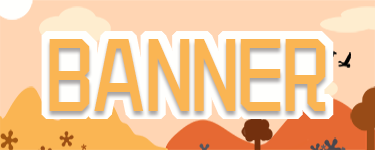
<style>
.page{position:relative;width:375px;height:150px;background:#ffd5b3}
.page>*{position:absolute;margin:0}
.t1{font:100px "zcoolqingkehuangyouti-Regular";color:#fab553;text-transform:uppercase}
</style>
<div class="page">
<p class="t1" style="left:49px;top:39px;width:277px;height:72px">banner</p>
</div>
